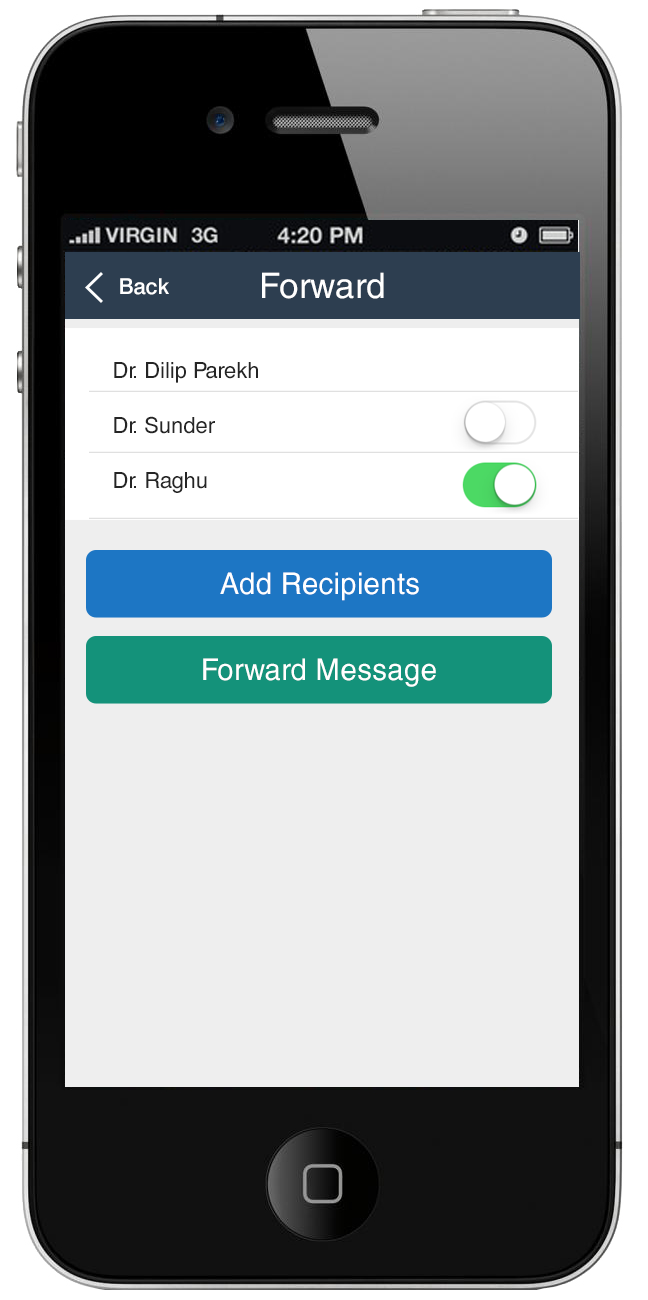
<style>
.page{position:relative;width:648px;height:1300px;background:#eeeeee}
.page>*{position:absolute;margin:0}
.t1{font:22px "Swiss721BT-Medium";color:#ffffff}
.t2{font:35px "HelveticaLT";color:#ffffff}
.t3{font:22px/55px "HelveticaCE-Regular";color:#252525}
.t4{font:30px "HelveticaCyr-Upright";color:#ffffff}
</style>
<div class="page">
<p class="t1" style="left:120px;top:278px;width:49px;height:17px">Back</p>
<p class="t2" style="left:262px;top:272px;width:122px;height:27px">Forward</p>
<p class="t3" style="left:114px;top:362px;width:144px;height:131px">Dr. Dilip Parekh<br>Dr. Sunder<br>Dr. Raghu</p>
<p class="t4" style="left:220px;top:572px;width:199px;height:29px">Add Recipients</p>
<p class="t4" style="left:203px;top:658px;width:233px;height:29px">Forward Message</p>
</div>
